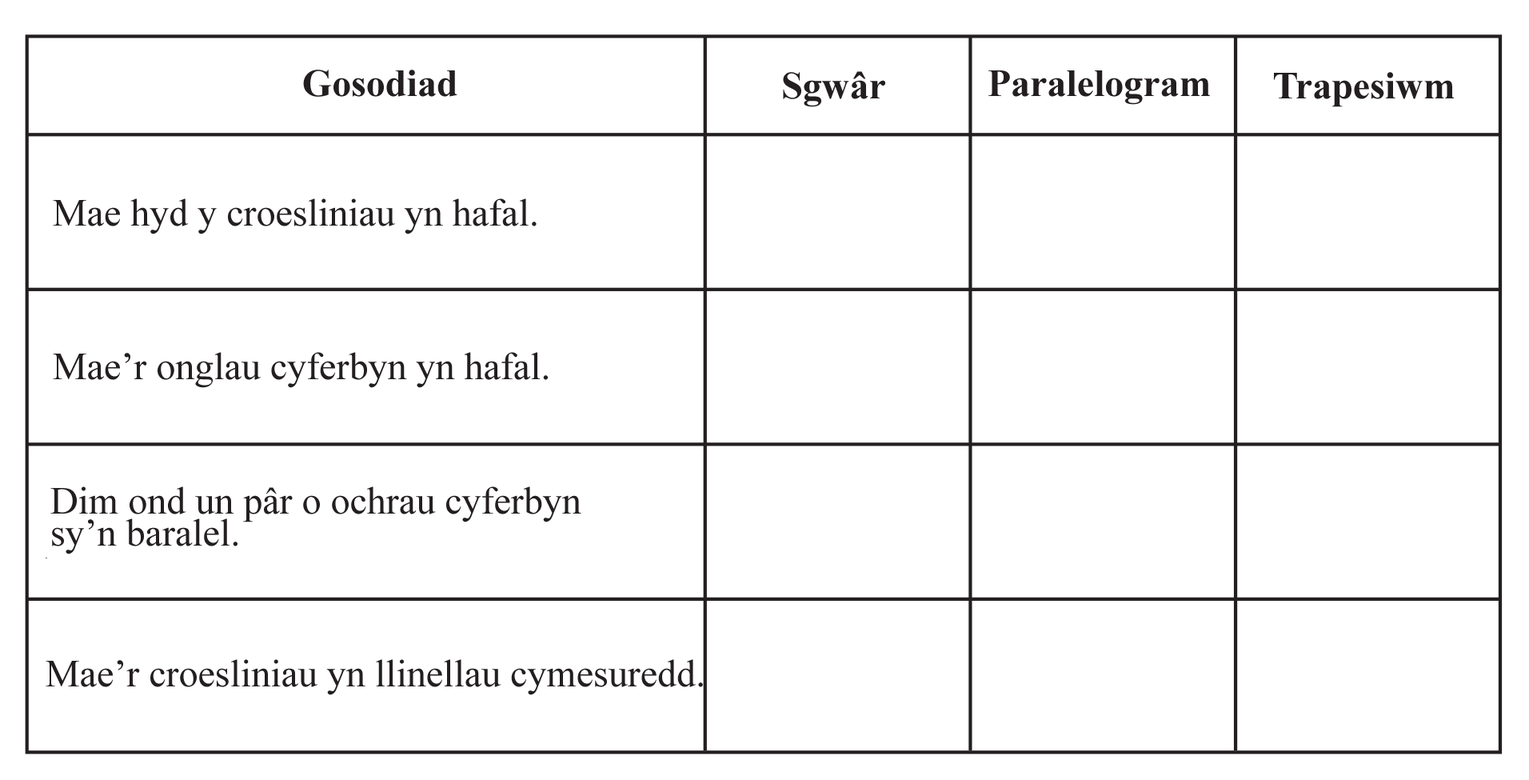
<style>
.page{position:relative;width:1529px;height:780px;background:#ffffff}
.page>*{position:absolute;margin:0}
.t1{font:38.4px "TimesNewRomanPS-BoldMT";color:#231f20}
.t2{font:38.4px "TimesNewRomanPSMT";color:#231f20}
.t3{font:38.4px/32px "TimesNewRomanPSMT";color:#231f20}
</style>
<div class="page">
<p class="t1" style="left:303px;top:70px;width:154px;height:27px">Gosodiad</p>
<p class="t1" style="left:783px;top:71px;width:102px;height:36px">Sgwâr</p>
<p class="t1" style="left:989px;top:70px;width:221px;height:35px">Paralelogram</p>
<p class="t1" style="left:1274px;top:72px;width:181px;height:35px">Trapesiwm</p>
<p class="t2" style="left:53px;top:198px;width:484px;height:36px">Mae hyd y croesliniau yn hafal.</p>
<p class="t2" style="left:53px;top:352px;width:495px;height:36px">Mae’r onglau cyferbyn yn hafal.</p>
<p class="t3" style="left:50px;top:486px;width:531px;height:68px">Dim ond un pâr o ochrau cyferbyn<br>sy’n baralel.</p>
<p class="t2" style="left:46px;top:659px;width:657px;height:36px">Mae’r croesliniau yn llinellau cymesuredd.</p>
</div>
